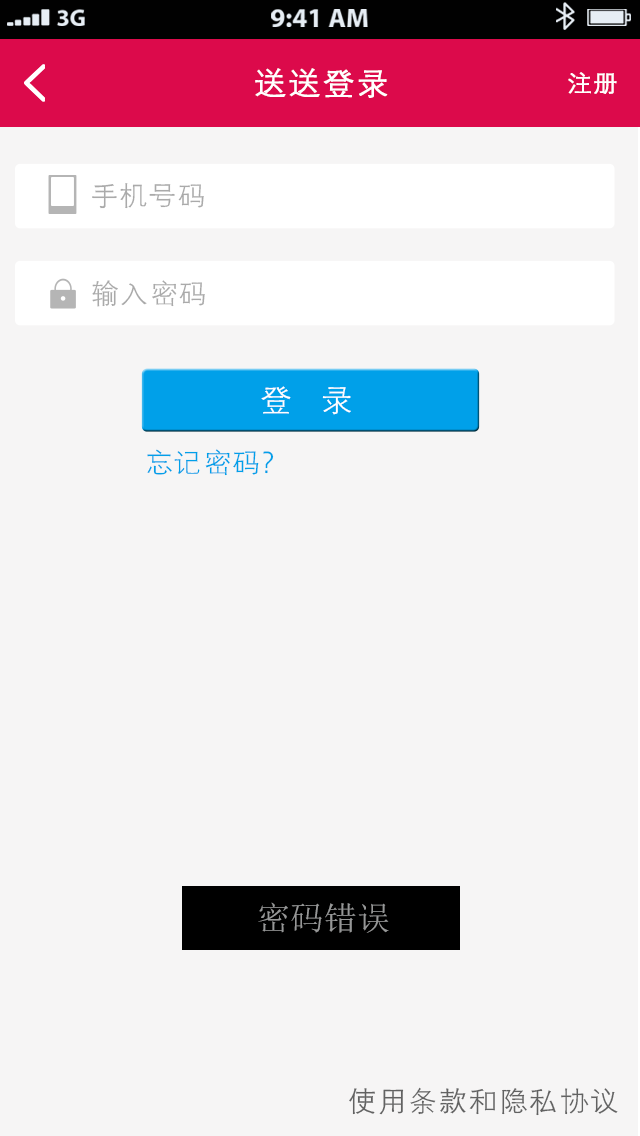
<style>
.page{position:relative;width:640px;height:1136px;background:#f6f5f5}
.page>*{position:absolute;margin:0}
.t1{font:33.3px "FZXH1JW--GB1-0";color:#ffffff;font-weight:bold}
.t2{font:25px "FZXH1JW--GB1-0";color:#ffffff;font-weight:bold}
.t3{font:29.2px "FZXH1JW--GB1-0";color:#aaaaaa}
.t4{font:33.3px "FZXH1JW--GB1-0";color:#ffffff}
.t5{font:29.2px "FZXH1JW--GB1-0";color:#00a0e9}
.t6{font:33.3px "SimSun";color:#969797}
.t7{font:30.3px "FZXH1JW--GB1-0";color:#626262}
</style>
<div class="page">
<p class="t1" style="left:255px;top:68px;width:133px;height:30px">送送登录</p>
<p class="t2" style="left:568px;top:72px;width:49px;height:22px">注册</p>
<p class="t3" style="left:92px;top:183px;width:112px;height:26px">手机号码</p>
<p class="t3" style="left:92px;top:280px;width:113px;height:27px">输入密码</p>
<p class="t4" style="left:261px;top:386px;width:90px;height:29px">登   录</p>
<p class="t5" style="left:147px;top:449px;width:127px;height:27px">忘记密码?</p>
<p class="t6" style="left:258px;top:902px;width:131px;height:31px">密码错误</p>
<p class="t7" style="left:349px;top:1087px;width:269px;height:29px">使用条款和隐私协议</p>
</div>
